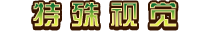
<style>
.page{position:relative;width:210px;height:31px;background:#ffffff}
.page>*{position:absolute;margin:0}
.t1{font:27px "JZhongYi";letter-spacing:0.3em;scale:1.11 1}
</style>
<div class="page">
<p class="t1" style="left:33px;top:2px;width:144px;height:25px">特殊视觉</p>
</div>
